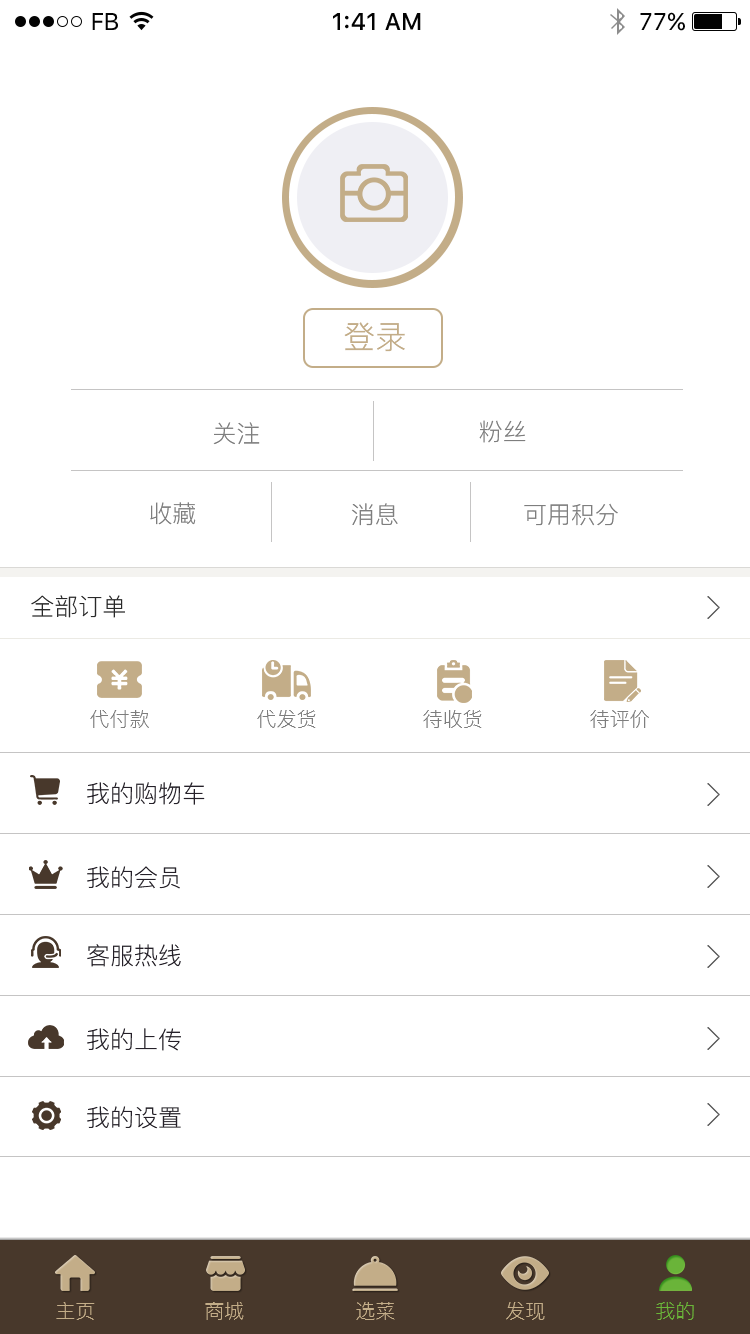
<style>
.page{position:relative;width:750px;height:1334px;background:#ffffff}
.page>*{position:absolute;margin:0}
.t1{font:32px "PingFang-SC-Regular";color:#c3ad88}
.t2{font:24px "PingFang-SC-Regular";color:#7e7e7e}
.t3{font:24px "PingFang-SC-Regular";color:#292929}
.t4{font:20px "PingFang-SC-Regular";color:#7e7e7e}
.t5{font:24px "PingFang-SC-Regular";color:#252029}
</style>
<div class="page">
<p class="t1" style="left:344px;top:322px;width:61px;height:30px">登录</p>
<p class="t2" style="left:213px;top:422px;width:47px;height:23px">关注</p>
<p class="t2" style="left:479px;top:420px;width:47px;height:23px">粉丝</p>
<p class="t2" style="left:150px;top:502px;width:46px;height:23px">收藏</p>
<p class="t2" style="left:351px;top:503px;width:47px;height:23px">消息</p>
<p class="t2" style="left:524px;top:503px;width:94px;height:23px">可用积分</p>
<p class="t3" style="left:31px;top:595px;width:94px;height:23px">全部订单</p>
<p class="t4" style="left:90px;top:710px;width:59px;height:18px">代付款</p>
<p class="t4" style="left:257px;top:710px;width:59px;height:18px">代发货</p>
<p class="t4" style="left:423px;top:710px;width:59px;height:18px">待收货</p>
<p class="t4" style="left:590px;top:710px;width:59px;height:18px">待评价</p>
<p class="t5" style="left:87px;top:782px;width:118px;height:23px">我的购物车</p>
<p class="t5" style="left:87px;top:866px;width:93px;height:23px">我的会员</p>
<p class="t5" style="left:87px;top:944px;width:94px;height:23px">客服热线</p>
<p class="t5" style="left:87px;top:1028px;width:94px;height:23px">我的上传</p>
<p class="t5" style="left:87px;top:1106px;width:94px;height:23px">我的设置</p>
</div>
